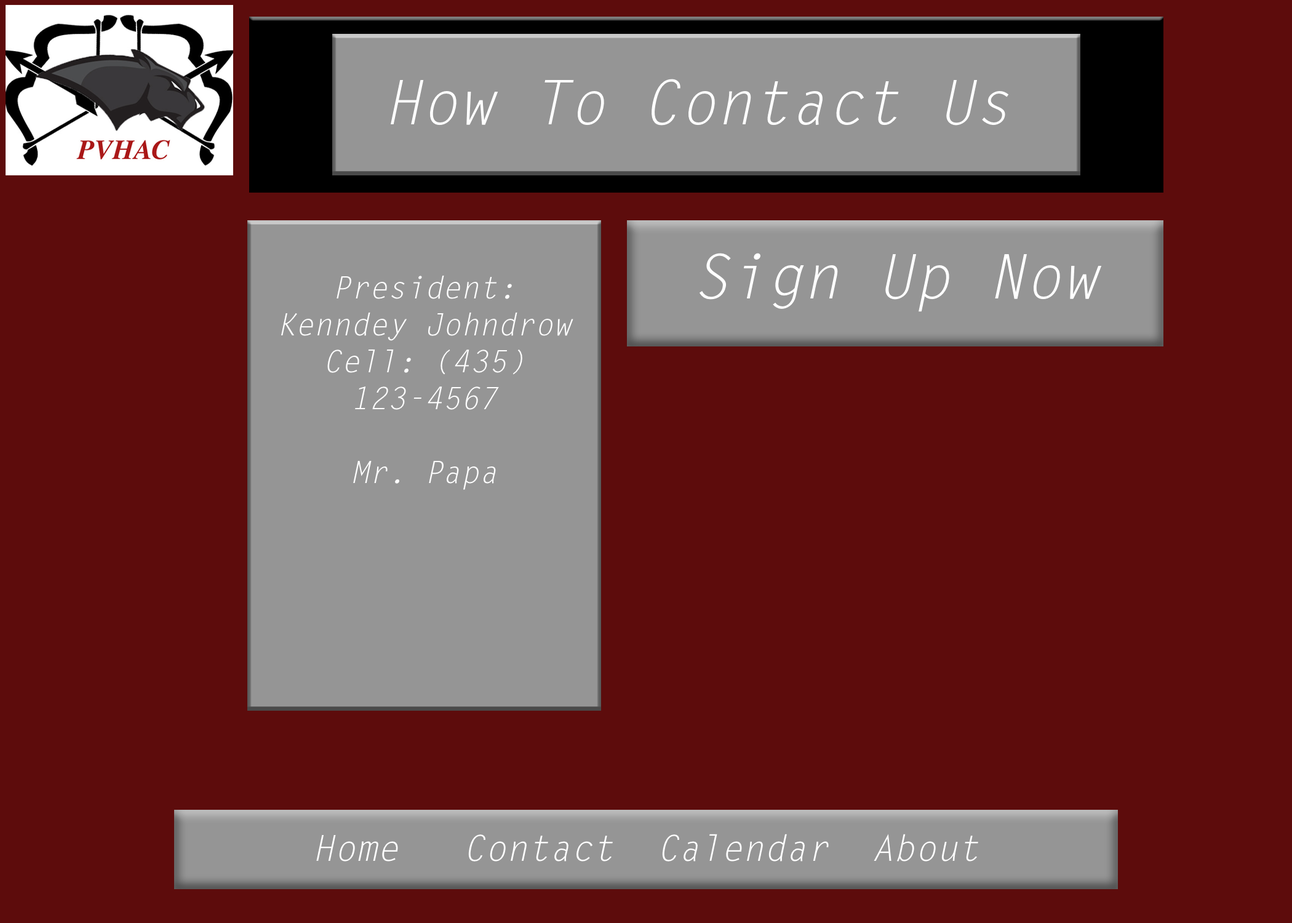
<style>
.page{position:relative;width:1292px;height:923px;background:#5d0c0c}
.page>*{position:absolute;margin:0}
.t1{font:61.5px "LetterGothicStd-Slanted";color:#ffffff}
.t2{font:30.8px "LetterGothicStd-Slanted";color:#ffffff}
.t3{font:35.9px "LetterGothicStd-Slanted";color:#ffffff}
</style>
<div class="page">
<p class="t1" style="left:391px;top:79px;width:618px;height:47px">How To Contact Us</p>
<p class="t1" style="left:700px;top:253px;width:402px;height:59px">Sign Up Now</p>
<p class="t2" style="left:281px;top:275px;width:292px;height:215px;text-align:center">President: <br>Kenndey Johndrow<br>Cell: (435) 123-4567<br><br>Mr. Papa</p>
<p class="t3" style="left:316px;top:834px;width:662px;height:27px">Home   Contact  Calendar  About</p>
</div>
